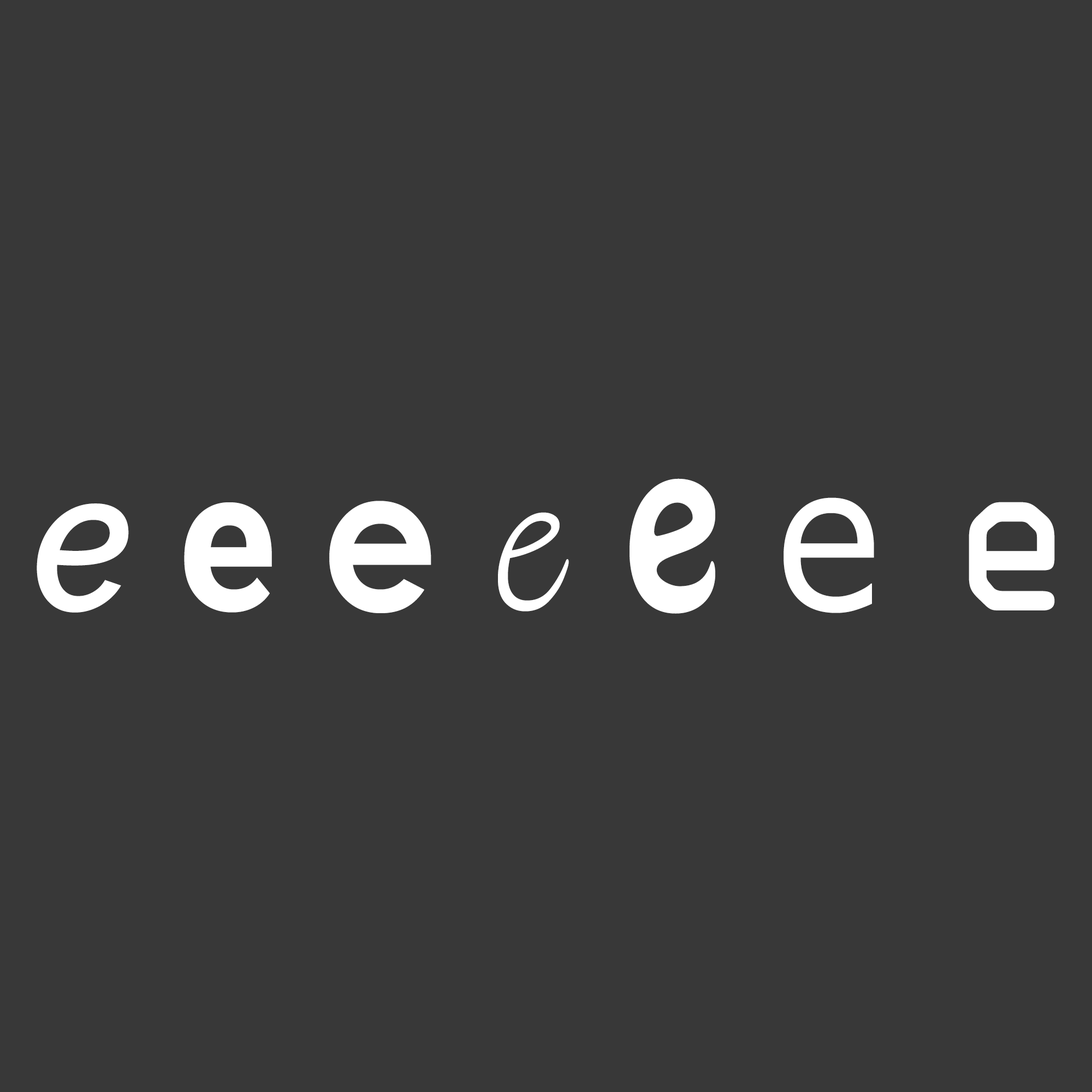
<style>
.page{position:relative;width:1092px;height:1092px;background:#383838}
.page>*{position:absolute;margin:0}
.t1{font:200.9px "Raleway-SemiBoldItalic";color:#ffffff;scale:0.91 1}
.t2{font:200.9px "Roboto-Bold";color:#ffffff;scale:0.91 1}
.t3{font:200.9px "CenturyGothic-Bold";color:#ffffff;scale:0.91 1}
.t4{font:200.9px "InkFree";color:#ffffff;scale:0.91 1}
.t5{font:200.9px "HoboStd";color:#ffffff;scale:0.91 1}
.t6{font:200.9px "MSReferenceSansSerif";color:#ffffff;scale:0.91 1}
.t7{font:200.9px "OCRAStd";color:#ffffff;scale:0.91 1}
</style>
<div class="page">
<p class="t1" style="left:37px;top:478px;width:1018px;height:136px">e<span class="t2"> e </span><span class="t3">e </span><span class="t4">e </span><span class="t5">e </span><span class="t6">e </span><span class="t7">e</span></p>
</div>
